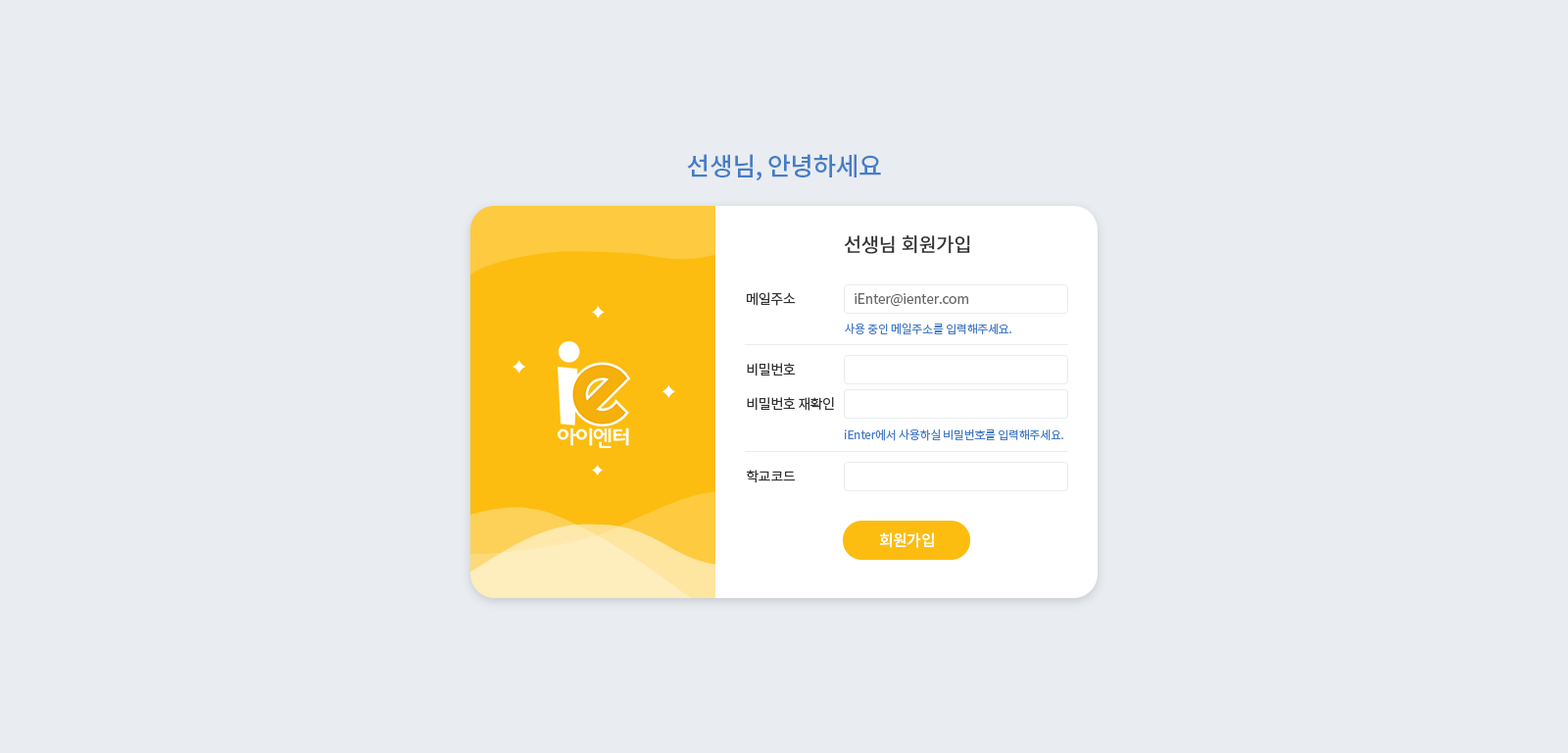
<style>
.page{position:relative;width:1568px;height:753px;background:#e9edf1}
.page>*{position:absolute;margin:0}
.t1{font:25.5px "NotoSansCJKkr-Medium";letter-spacing:-0.025em;color:#457dc9}
.t2{font:19.6px "NotoSansCJKkr-Medium";letter-spacing:-0.025em;color:#333333}
.t3{font:13.7px "NotoSansCJKkr-Regular";letter-spacing:-0.025em;color:#333333}
.t4{font:13.7px "NotoSansCJKkr-Regular";letter-spacing:-0.025em;color:#666666}
.t5{font:11.8px "NotoSansCJKkr-Regular";letter-spacing:-0.025em;color:#457dc9}
.t6{font:13.7px/34.3px "NotoSansCJKkr-Regular";letter-spacing:-0.025em;color:#333333}
.t7{font:15.7px "NotoSansCJKkr-Medium";letter-spacing:-0.025em;color:#ffffff}
</style>
<div class="page">
<p class="t1" style="left:687px;top:154px;width:194px;height:27px">선생님, 안녕하세요</p>
<p class="t2" style="left:844px;top:235px;width:126px;height:19px">선생님 회원가입</p>
<p class="t3" style="left:747px;top:292px;width:49px;height:14px">메일주소</p>
<p class="t4" style="left:855px;top:293px;width:113px;height:14px">iEnter@ienter.com</p>
<p class="t5" style="left:845px;top:322px;width:166px;height:13px">사용 중인 메일주소를 입력해주세요.</p>
<p class="t6" style="left:747px;top:363px;width:87px;height:48px">비밀번호<br>비밀번호 재확인</p>
<p class="t5" style="left:845px;top:428px;width:218px;height:13px">iEnter에서 사용하실 비밀번호를 입력해주세요.</p>
<p class="t3" style="left:747px;top:469px;width:48px;height:14px">학교코드</p>
<p class="t7" style="left:879px;top:532px;width:55px;height:16px">회원가입</p>
</div>
